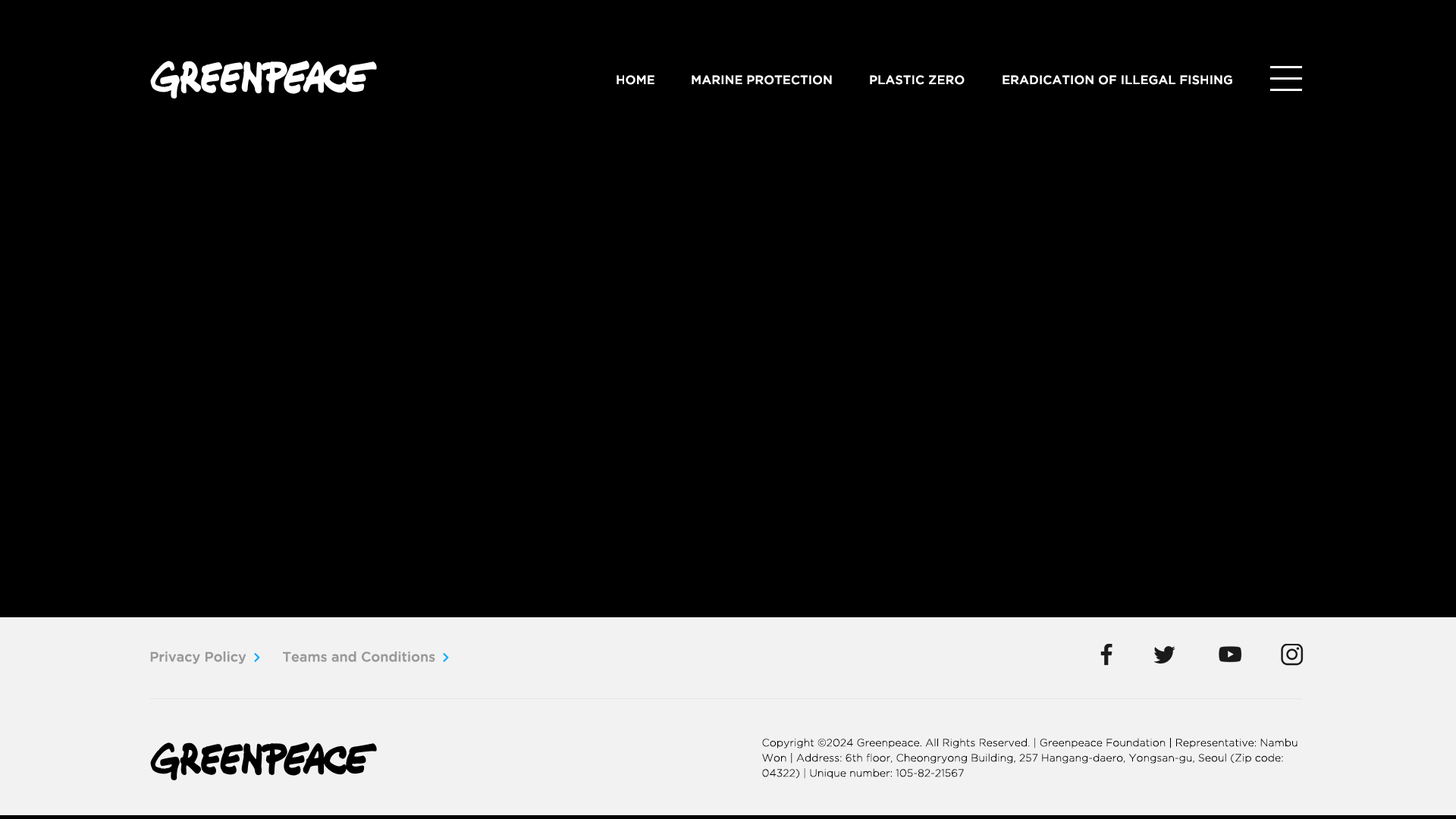
<style>
.page{position:relative;width:1456px;height:819px;background:#000000}
.page>*{position:absolute;margin:0}
.t1{font:12.1px "GothamPro-Medium";color:#ffffff;text-transform:uppercase}
.t2{font:13.6px "GothamPro-Medium";color:#999999}
.t3{font:10.6px/15.2px "GothamPro-Light";color:#000000}
</style>
<div class="page">
<p class="t1" style="left:617px;top:75px;width:37px;height:10px">home</p>
<p class="t1" style="left:692px;top:75px;width:140px;height:10px">Marine protection</p>
<p class="t1" style="left:870px;top:75px;width:95px;height:10px">Plastic Zero</p>
<p class="t1" style="left:1003px;top:75px;width:229px;height:10px">Eradication of illegal fishing</p>
<p class="t2" style="left:150px;top:651px;width:96px;height:13px">Privacy Policy</p>
<p class="t2" style="left:283px;top:651px;width:152px;height:11px">Teams and Conditions</p>
<p class="t3" style="left:762px;top:738px;width:535px;height:41px">Copyright ©2024 Greenpeace. All Rights Reserved. | Greenpeace Foundation | Representative: Nambu Won | Address: 6th floor, Cheongryong Building, 257 Hangang-daero, Yongsan-gu, Seoul (Zip code: 04322) | Unique number: 105-82-21567</p>
</div>
